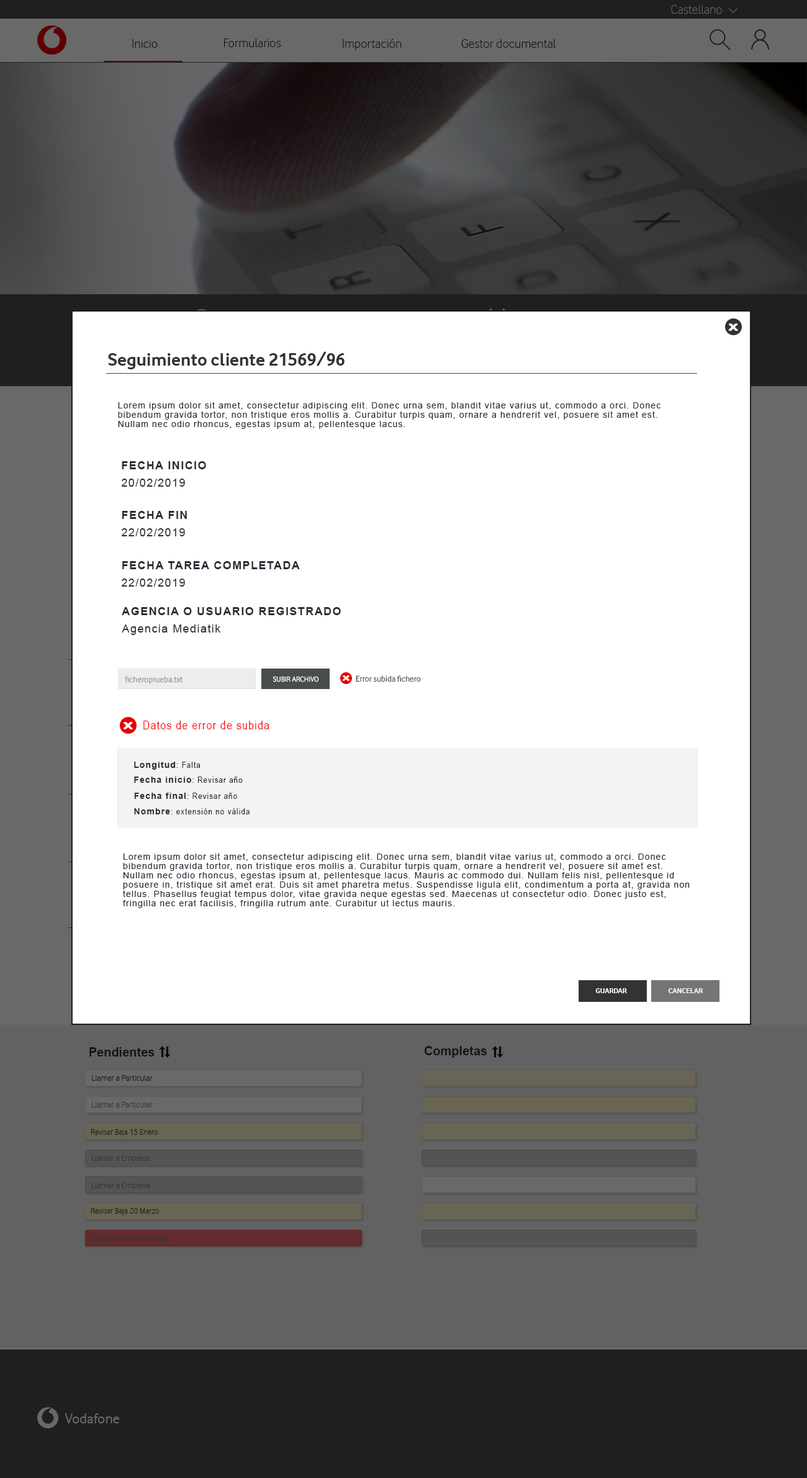
<style>
.page{position:relative;width:807px;height:1478px;background:#ffffff}
.page>*{position:absolute;margin:0}
.t1{font:13px "VodafoneLt-Regular";color:#696969}
.t2{font:13px "VodafoneLt-Regular";color:#151515}
.t3{font:11.5px "ArialMT";color:#ffffff;scale:1.57 1}
.t4{font:18.6px "VodafoneRg-Bold";color:#333333}
.t5{font:8.7px/9.3px "ArialMT";letter-spacing:0.08em;color:#2d2d37}
.t6{font:11.2px "Arial-BoldMT";letter-spacing:0.08em;color:#2d2d37}
.t7{font:11.2px "ArialMT";letter-spacing:0.08em;color:#2d2d37}
.t8{font:8.7px "VodafoneRg-Regular";color:#969292}
.t9{font:7.4px "VodafoneRg-Regular";color:#ffffff}
.t10{font:8.1px "ArialMT";color:#ffffff;scale:1.57 1}
.t11{font:8.7px "VodafoneRg-Regular";color:#4a4d4e}
.t12{font:11.6px "ArialNarrow";letter-spacing:0.08em;color:#ff0000}
.t13{font:8.7px "Arial-BoldMT";letter-spacing:0.08em;color:#2d2d37}
.t14{font:8.7px "ArialNarrow";letter-spacing:0.08em;color:#2d2d37}
.t15{font:7.4px "VodafoneRg-Bold";color:#ffffff}
.t16{font:12.4px "Arial-BoldMT";color:#151515}
.t17{font:8.7px "VodafoneLt-Regular";color:#151515}
.t18{font:8.7px "VodafoneLt-Regular";color:#333333}
.t19{font:8.7px "VodafoneLt-Regular";color:#151515;scale:0.96 1}
.t20{font:14.9px "VodafoneRg-Regular";color:#696969}
</style>
<div class="page">
<p class="t1" style="left:671px;top:4px;width:51px;height:10px">Castellano</p>
<p class="t2" style="left:132px;top:39px;width:26px;height:9px">Inicio</p>
<p class="t2" style="left:224px;top:38px;width:57px;height:9px">Formularios</p>
<p class="t2" style="left:343px;top:38px;width:59px;height:12px">Importación</p>
<p class="t2" style="left:461px;top:39px;width:95px;height:9px">Gestor documental</p>
<p class="t3" style="left:729px;top:324px;width:9px;height:6px">x</p>
<p class="t4" style="left:108px;top:351px;width:236px;height:18px">Seguimiento cliente 21569/96</p>
<p class="t5" style="left:118px;top:402px;width:542px;height:27px">Lorem ipsum dolor sit amet, consectetur adipiscing elit. Donec urna sem, blandit vitae varius ut, commodo a orci. Donec bibendum gravida tortor, non tristique eros mollis a. Curabitur turpis quam, ornare a hendrerit vel, posuere sit amet est. Nullam nec odio rhoncus, egestas ipsum at, pellentesque lacus.</p>
<p class="t6" style="left:122px;top:461px;width:84px;height:8px">FECHA INICIO</p>
<p class="t7" style="left:122px;top:479px;width:63px;height:8px">20/02/2019</p>
<p class="t6" style="left:122px;top:511px;width:65px;height:8px">FECHA FIN</p>
<p class="t7" style="left:122px;top:528px;width:63px;height:8px">22/02/2019</p>
<p class="t6" style="left:122px;top:561px;width:178px;height:8px">FECHA TAREA COMPLETADA</p>
<p class="t7" style="left:122px;top:578px;width:63px;height:9px">22/02/2019</p>
<p class="t6" style="left:122px;top:607px;width:219px;height:8px">AGENCIA O USUARIO REGISTRADO</p>
<p class="t7" style="left:122px;top:624px;width:98px;height:11px">Agencia Mediatik</p>
<p class="t8" style="left:125px;top:676px;width:57px;height:8px">ficheroprueba.txt</p>
<p class="t9" style="left:272px;top:676px;width:47px;height:6px">SUBIR ARCHIVO</p>
<p class="t10" style="left:343px;top:676px;width:6px;height:4px">x</p>
<p class="t11" style="left:356px;top:675px;width:65px;height:7px">Error subida fichero</p>
<p class="t3" style="left:124px;top:722px;width:9px;height:7px">x</p>
<p class="t12" style="left:143px;top:721px;width:126px;height:8px">Datos de error de subida</p>
<p class="t13" style="left:134px;top:762px;width:66px;height:8px">Longitud<span class="t14">: Falta</span></p>
<p class="t14" style="left:134px;top:776px;width:109px;height:7px"><span class="t13">Fecha inicio</span>: Revisar año</p>
<p class="t14" style="left:134px;top:793px;width:103px;height:6px"><span class="t13">Fecha final</span>: Revisar año</p>
<p class="t14" style="left:134px;top:808px;width:116px;height:6px"><span class="t13">Nombre</span>: extensión no válida</p>
<p class="t5" style="left:123px;top:853px;width:567px;height:55px">Lorem ipsum dolor sit amet, consectetur adipiscing elit. Donec urna sem, blandit vitae varius ut, commodo a orci. Donec bibendum gravida tortor, non tristique eros mollis a. Curabitur turpis quam, ornare a hendrerit vel, posuere sit amet est. Nullam nec odio rhoncus, egestas ipsum at, pellentesque lacus. Mauris ac commodo dui. Nullam felis nisl, pellentesque id posuere in, tristique sit amet erat. Duis sit amet pharetra metus. Suspendisse ligula elit, condimentum a porta at, gravida non tellus. Phasellus feugiat tempus dolor, vitae gravida neque egestas sed. Maecenas ut consectetur odio. Donec justo est, fringilla nec erat facilisis, fringilla rutrum ante. Curabitur ut lectus mauris.</p>
<p class="t15" style="left:595px;top:988px;width:32px;height:5px">GUARDAR</p>
<p class="t15" style="left:668px;top:988px;width:35px;height:5px">CANCELAR</p>
<p class="t16" style="left:89px;top:1047px;width:66px;height:9px">Pendientes</p>
<p class="t16" style="left:425px;top:1046px;width:62px;height:12px">Completas</p>
<p class="t17" style="left:92px;top:1075px;width:61px;height:6px">Llamar a Particular</p>
<p class="t18" style="left:92px;top:1102px;width:61px;height:5px">Llamar a Particular</p>
<p class="t19" style="left:91px;top:1129px;width:67px;height:7px">Revisar Baja 15 Enero</p>
<p class="t18" style="left:92px;top:1155px;width:58px;height:8px">Llamar a Empresa</p>
<p class="t18" style="left:92px;top:1182px;width:58px;height:8px">Llamar a Empresa</p>
<p class="t19" style="left:91px;top:1208px;width:68px;height:7px">Revisar Baja 20 Marzo</p>
<p class="t18" style="left:91px;top:1235px;width:78px;height:8px">Seguimiento a empresa</p>
<p class="t20" style="left:65px;top:1413px;width:55px;height:10px">Vodafone</p>
</div>
